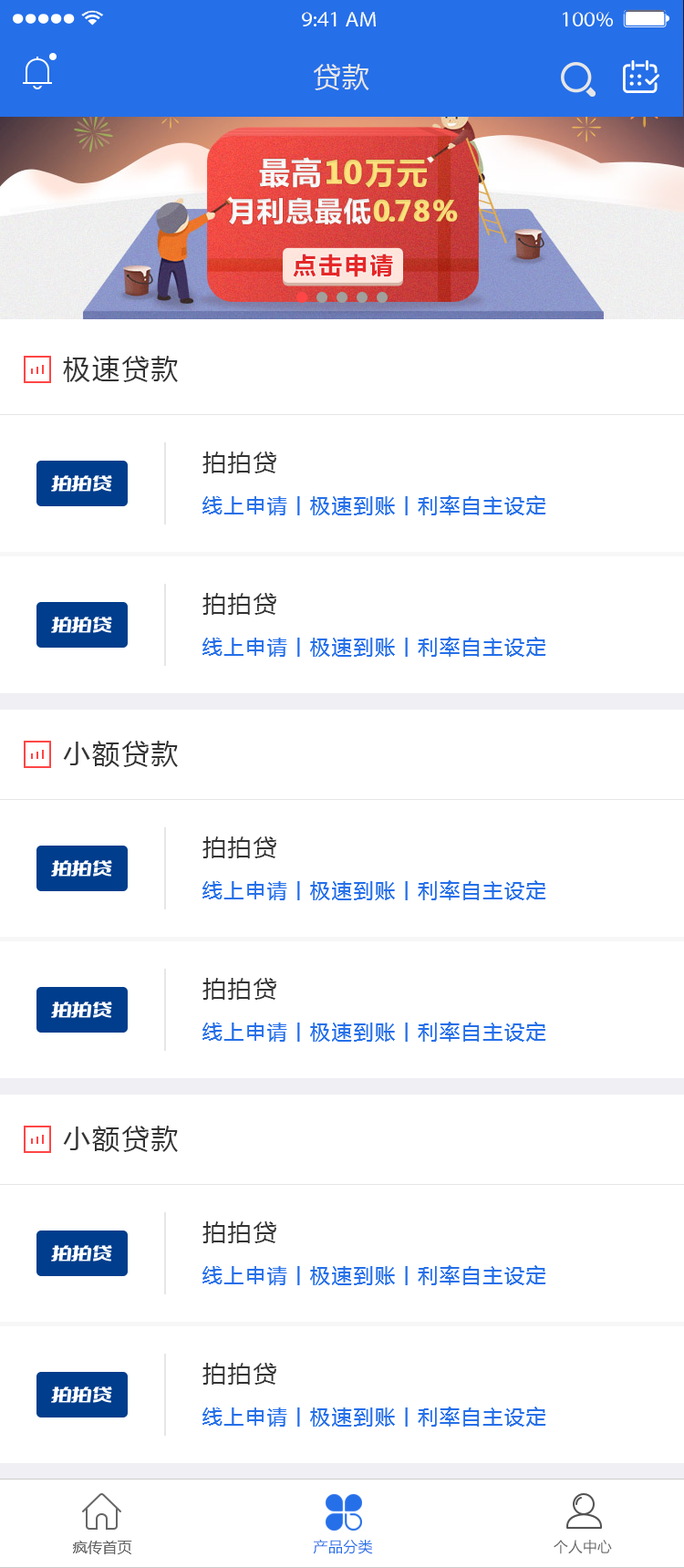
<style>
.page{position:relative;width:684px;height:1568px;background:#ffffff}
.page>*{position:absolute;margin:0}
.t1{font:27.4px "MicrosoftYaHei";letter-spacing:0.05em;color:#e6e6e6}
.t2{font:27.4px "MicrosoftYaHei";letter-spacing:0.075em;color:#333333}
.t3{font:23.7px "MicrosoftYaHei";letter-spacing:0.075em;color:#333333}
.t4{font:20.1px "MicrosoftYaHei";letter-spacing:0.075em;color:#256fe9}
.t5{font:14.6px "MicrosoftYaHei";letter-spacing:0.025em;color:#666666}
.t6{font:14.6px "MicrosoftYaHei";letter-spacing:0.02em;color:#256fe9}
.t7{font:14.3px "MicrosoftYaHei";letter-spacing:0.02em;color:#666666}
</style>
<div class="page">
<p class="t1" style="left:314px;top:64px;width:55px;height:26px">贷款</p>
<p class="t2" style="left:63px;top:356px;width:115px;height:26px">极速贷款</p>
<p class="t3" style="left:202px;top:452px;width:74px;height:21px">拍拍贷</p>
<p class="t4" style="left:202px;top:495px;width:344px;height:20px">线上申请丨极速到账丨利率自主设定</p>
<p class="t3" style="left:202px;top:593px;width:74px;height:22px">拍拍贷</p>
<p class="t4" style="left:202px;top:637px;width:344px;height:20px">线上申请丨极速到账丨利率自主设定</p>
<p class="t2" style="left:63px;top:741px;width:115px;height:26px">小额贷款</p>
<p class="t3" style="left:202px;top:836px;width:74px;height:22px">拍拍贷</p>
<p class="t4" style="left:202px;top:880px;width:344px;height:20px">线上申请丨极速到账丨利率自主设定</p>
<p class="t3" style="left:202px;top:978px;width:74px;height:22px">拍拍贷</p>
<p class="t4" style="left:202px;top:1022px;width:344px;height:20px">线上申请丨极速到账丨利率自主设定</p>
<p class="t2" style="left:63px;top:1126px;width:115px;height:26px">小额贷款</p>
<p class="t3" style="left:202px;top:1221px;width:74px;height:22px">拍拍贷</p>
<p class="t4" style="left:202px;top:1265px;width:344px;height:20px">线上申请丨极速到账丨利率自主设定</p>
<p class="t3" style="left:202px;top:1363px;width:74px;height:22px">拍拍贷</p>
<p class="t4" style="left:202px;top:1407px;width:344px;height:20px">线上申请丨极速到账丨利率自主设定</p>
<p class="t5" style="left:73px;top:1541px;width:59px;height:13px">疯传首页</p>
<p class="t6" style="left:313px;top:1540px;width:60px;height:14px">产品分类</p>
<p class="t7" style="left:554px;top:1540px;width:58px;height:14px">个人中心</p>
</div>
